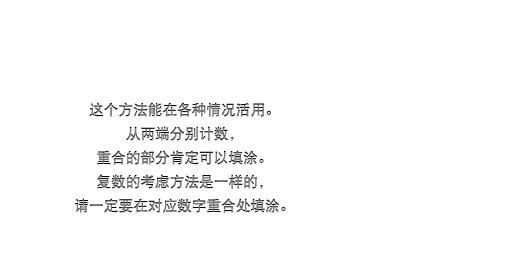
<style>
.page{position:relative;width:512px;height:256px;background:#ffffff}
.page>*{position:absolute;margin:0}
.t1{font:14.7px/24px "DFPHeiW5-GB"}
</style>
<div class="page">
<p class="t1" style="left:75px;top:102px;width:211px;height:111px;text-align:center">这个方法能在各种情况活用。<br>从两端分别计数，<br>重合的部分肯定可以填涂。<br>复数的考虑方法是一样的，<br>请一定要在对应数字重合处填涂。</p>
</div>
